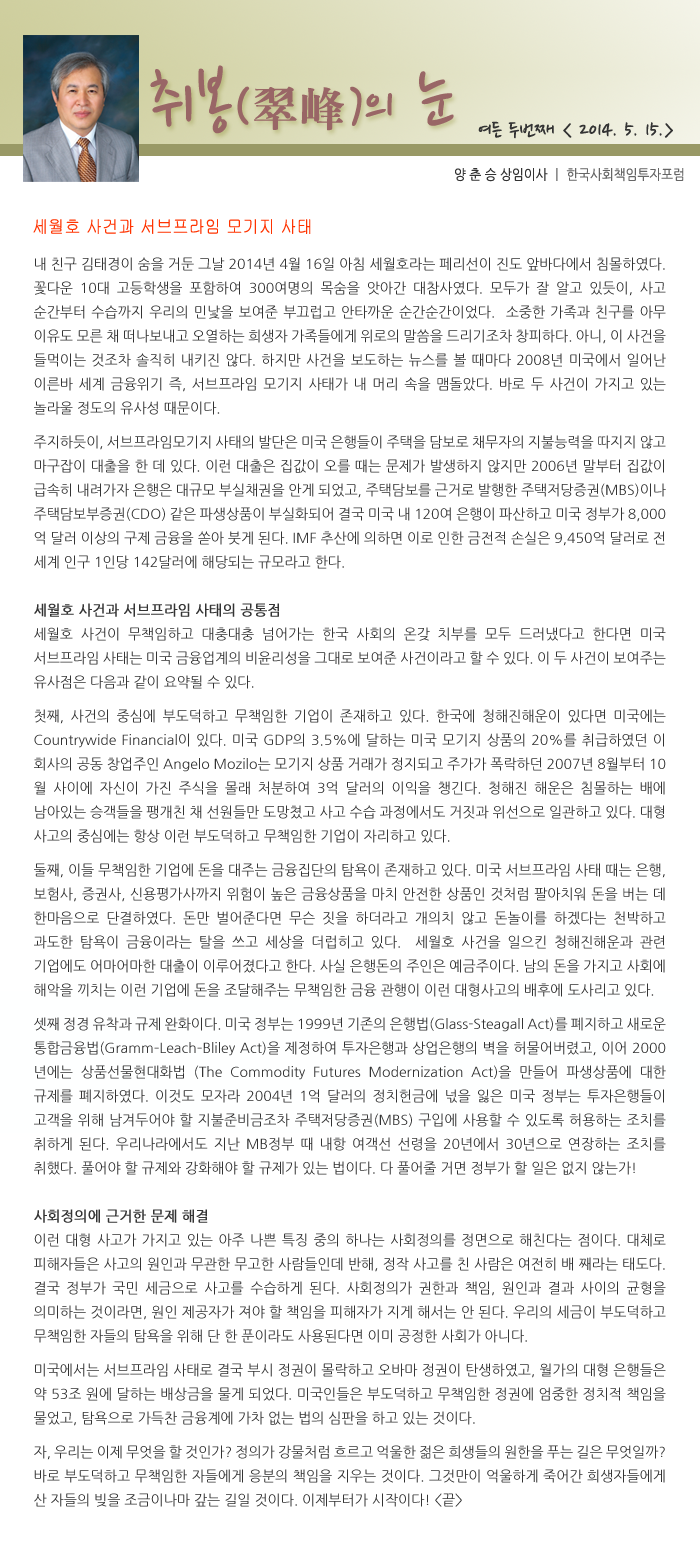
<style>
.page{position:relative;width:700px;height:1559px;background:#ffffff}
.page>*{position:absolute;margin:0}
.t1{font:77.5px "NanumPen";color:#996666}
.t2{font:60px "NanumPen";color:#996666}
.t3{font:48px "H2mjrE";color:#996666}
.t4{font:24px "NanumPen";color:#333333}
.t5{font:14px "NanumGothic";color:#666666;scale:0.9 1}
.t6{font:14px "NanumGothic";color:#333333;scale:0.9 1}
.t7{font:18px "Gulim";color:#ff3300;scale:0.9 1}
.t8{font:14px/24px "NanumGothic";color:#333333}
.t9{font:14px/10px "NanumGothic";color:#333333}
.t10{font:14px/24px "NanumGothic";color:#333333;font-weight:bold}
</style>
<div class="page">
<p class="t1" style="left:150px;top:65px;width:304px;height:69px">취봉<span class="t2">(</span><span class="t3">翠峰</span><span class="t2">)</span><span class="t2">의</span> 눈</p>
<p class="t4" style="left:478px;top:121px;width:195px;height:18px">여든 두번째 &lt; 2014. 5. 15.&gt;</p>
<p class="t5" style="left:455px;top:168px;width:229px;height:14px"><span class="t6">양 춘 승 상임이사 </span>ㅣ 한국사회책임투자포럼</p>
<p class="t7" style="left:33px;top:219px;width:278px;height:15px">세월호 사건과 서브프라임 모기지 사태</p>
<p class="t8" style="left:34px;top:257px;width:632px;height:1250px;text-align:justify">내 친구 김태경이 숨을 거둔 그날 2014년 4월 16일 아침 세월호라는 페리선이 진도 앞바다에서 침몰하였다. 꽃다운 10대 고등학생을 포함하여 300여명의 목숨을 앗아간 대참사였다. 모두가 잘 알고 있듯이, 사고 순간부터 수습까지 우리의 민낯을 보여준 부끄럽고 안타까운 순간순간이었다.  소중한 가족과 친구를 아무 이유도 모른 채 떠나보내고 오열하는 희생자 가족들에게 위로의 말씀을 드리기조차 창피하다. 아니, 이 사건을 들먹이는 것조차 솔직히 내키진 않다. 하지만 사건을 보도하는 뉴스를 볼 때마다 2008년 미국에서 일어난 이른바 세계 금융위기 즉, 서브프라임 모기지 사태가 내 머리 속을 맴돌았다. 바로 두 사건이 가지고 있는 놀라울 정<span class="t9">도의 유사성 때문이다.<br><br>주지하듯이, 서브프</span>라임모기지 사태의 발단은 미국 은행들이 주택을 담보로 채무자의 지불능력을 따지지 않고 마구잡이 대출을 한 데 있다. 이런 대출은 집값이 오를 때는 문제가 발생하지 않지만 2006년 말부터 집값이 급속히 내려가자 은행은 대규모 부실채권을 안게 되었고, 주택담보를 근거로 발행한 주택저당증권(MBS)이나 주택담보부증권(CDO) 같은 파생상품이 부실화되어 결국 미국 내 120여 은행이 파산하고 미국 정부가 8,000억 달러 이상의 구제 금융을 쏟아 붓게 된다. IMF 추산에 의하면 이로 인한 금전적 손실은 9,450억 달러로 전 세계 인구 1인당 142달러에 해당되는 규모라고 한다.  <br><br><span class="t10">세월호 사건과 서브프라임 사태의 공통점<br></span>세월호 사건이 무책임하고 대충대충 넘어가는 한국 사회의 온갖 치부를 모두 드러냈다고 한다면 미국 서브프라임 사태는 미국 금융업계의 비윤리성을 그대로 보여준 사건이라고 할 수 있다. 이 두 사건이 보여주는 유사점은 다음과 같이 요약<span class="t9">될 수 있다.<br><br>첫째, 사건의 중심에 부도덕하고 무</span>책임한 기업이 존재하고 있다. 한국에 청해진해운이 있다면 미국에는 Countrywide Financial이 있다. 미국 GDP의 3.5%에 달하는 미국 모기지 상품의 20%를 취급하였던 이 회사의 공동 창업주인 Angelo Mozilo는 모기지 상품 거래가 정지되고 주가가 폭락하던 2007년 8월부터 10월 사이에 자신이 가진 주식을 몰래 처분하여 3억 달러의 이익을 챙긴다. 청해진 해운은 침몰하는 배에 남아있는 승객들을 팽개친 채 선원들만 도망쳤고 사고 수습 과정에서도 거짓과 위선으로 일관하고 있다. 대형 사고의 중심에는 항상 이런 부도<span class="t9">덕하고 무책임한 기업이 자리하고 있다.<br><br>둘째, 이들 무책임한 기업에 돈을 대주는 금융집단의 탐욕이 존재하고</span> 있다. 미국 서브프라임 사태 때는 은행, 보험사, 증권사, 신용평가사까지 위험이 높은 금융상품을 마치 안전한 상품인 것처럼 팔아치워 돈을 버는 데 한마음으로 단결하였다. 돈만 벌어준다면 무슨 짓을 하더라고 개의치 않고 돈놀이를 하겠다는 천박하고 과도한 탐욕이 금융이라는 탈을 쓰고 세상을 더럽히고 있다.  세월호 사건을 일으킨 청해진해운과 관련 기업에도 어마어마한 대출이 이루어졌다고 한다. 사실 은행돈의 주인은 예금주이다. 남의 돈을 가지고 사회에 해악을 끼치는 이런 기업에 돈을 조달해주는 무책<span class="t9">임한 금융 관행이 이런 대형사고의 배후에 도사리고 있다. <br><br>셋째 정경 유착과 규제 완화이다. 미국 정부는 1999년 기존의 은행법(Glass-Ste</span>agall Act)를 폐지하고 새로운 통합금융법(Gramm–Leach–Bliley Act)을 제정하여 투자은행과 상업은행의 벽을 허물어버렸고, 이어 2000년에는 상품선물현대화법 (The Commodity Futures Modernization Act)을 만들어 파생상품에 대한 규제를 폐지하였다. 이것도 모자라 2004년 1억 달러의 정치헌금에 넋을 잃은 미국 정부는 투자은행들이 고객을 위해 남겨두어야 할 지불준비금조차 주택저당증권(MBS) 구입에 사용할 수 있도록 허용하는 조치를 취하게 된다. 우리나라에서도 지난 MB정부 때 내항 여객선 선령을 20년에서 30년으로 연장하는 조치를 취했다. 풀어야 할 규제와 강화해야 할 규제가 있는 법이다. 다 풀어줄 거면 정부가 할 일은 없지 않는가! <br><br><span class="t10">사회정의에 근거한 문제 해결  <br></span>이런 대형 사고가 가지고 있는 아주 나쁜 특징 중의 하나는 사회정의를 정면으로 해친다는 점이다. 대체로 피해자들은 사고의 원인과 무관한 무고한 사람들인데 반해, 정작 사고를 친 사람은 여전히 배 째라는 태도다. 결국 정부가 국민 세금으로 사고를 수습하게 된다. 사회정의가 권한과 책임, 원인과 결과 사이의 균형을 의미하는 것이라면, 원인 제공자가 져야 할 책임을 피해자가 지게 해서는 안 된다. 우리의 세금이 부도덕하고 무책임한 자들의 탐욕을 위해 단 한 푼이<span class="t9">라도 사용된다면 이미 공정한 사회가 아니다.<br><br>미국에서는 서브프라임 사태로 결국 부시 정권이 몰락하고 오바마 </span>정권이 탄생하였고, 월가의 대형 은행들은 약 53조 원에 달하는 배상금을 물게 되었다. 미국인들은 부도덕하고 무책임한 정권에 엄중한 정치적 책임을 물었고, 탐욕으로 가득찬 금융계에 가차 없는 법의 심판을 <span class="t9">하고 있는 것이다. <br><br>자, 우리는 이제 무엇을 할 것인가? 정의가 강물처럼 흐르고 억울한 </span>젊은 희생들의 원한을 푸는 길은 무엇일까? 바로 부도덕하고 무책임한 자들에게 응분의 책임을 지우는 것이다. 그것만이 억울하게 죽어간 희생자들에게  산 자들의 빚을 조금이나마 갚는 길일 것이다. 이제부터가 시작이다! &lt;끝&gt;</p>
</div>
